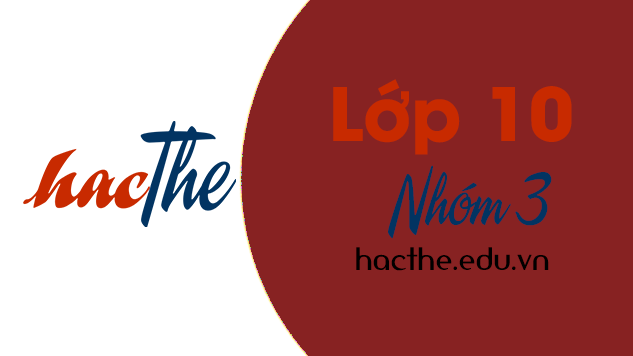
<style>
.page{position:relative;width:633px;height:356px;background:#872222}
.page>*{position:absolute;margin:0}
.t1{font:72.9px "UTMAvoBold";color:#c82a00}
.t2{font:72.9px "UTM-A&S-Signwriter";color:#023462}
.t3{font:30.4px "UTM-Amerika-Sans";color:#000000}
</style>
<div class="page">
<p class="t1" style="left:333px;top:79px;width:239px;height:76px">Lớp 10</p>
<p class="t2" style="left:388px;top:165px;width:164px;height:74px">Nhóm 3</p>
<p class="t3" style="left:356px;top:247px;width:193px;height:24px">hacthe.edu.vn</p>
</div>
